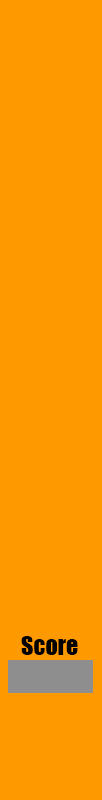
<style>
.page{position:relative;width:102px;height:800px;background:#ff9900}
.page>*{position:absolute;margin:0}
.t1{font:24px "Impact";color:#000000}
</style>
<div class="page">
<p class="t1" style="left:21px;top:636px;width:57px;height:19px">Score</p>
</div>
